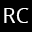
<style>
.page{position:relative;width:32px;height:32px;background:#000000}
.page>*{position:absolute;margin:0}
.t1{font:21.3px "OpenSans";color:#ffffff}
</style>
<div class="page">
<p class="t1" style="left:4px;top:8px;width:25px;height:15px">RC</p>
</div>
